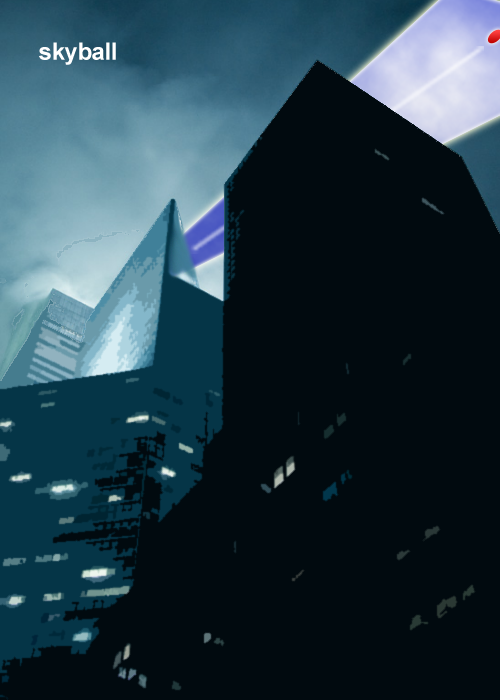
<style>
.page{position:relative;width:500px;height:700px;background:#010a0f}
.page>*{position:absolute;margin:0}
.t1{font:24px "Arial-BoldMT";letter-spacing:-0.02em;color:#ffffff}
</style>
<div class="page">
<p class="t1" style="left:39px;top:42px;width:77px;height:23px">skyball</p>
</div>
